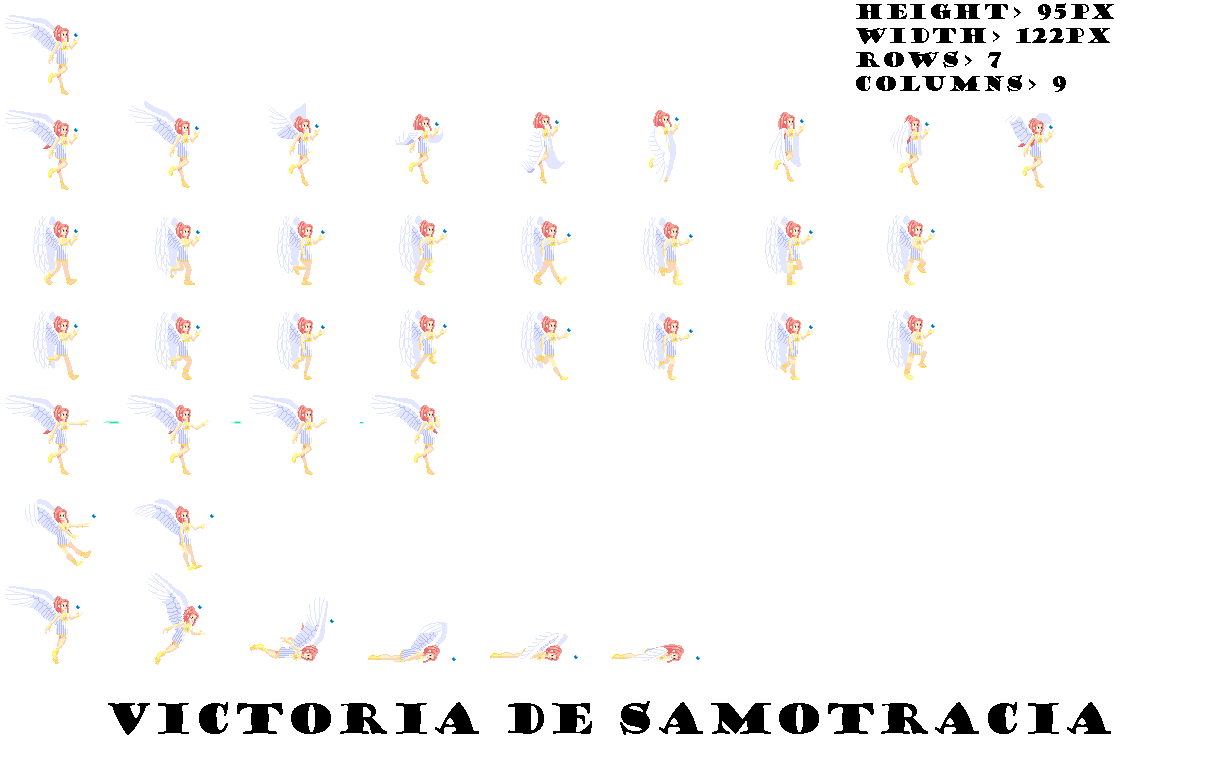
<style>
.page{position:relative;width:1220px;height:760px;background:#ffffff}
.page>*{position:absolute;margin:0}
.t1{font:20px "GoudyStout";color:#000000}
.t2{font:40px "GoudyStout";color:#000000}
.t3{font:26.7px "GoudyStout";color:#000000}
</style>
<div class="page">
<p class="t1" style="left:856px;top:3px;width:258px;height:89px">height&gt; 95px<br>width&gt; 122px<br>rows&gt; 7<br>columns&gt; 9</p>
<p class="t2" style="left:108px;top:701px;width:1003px;height:34px"><span class="t3"><br></span>victoria de samotracia</p>
</div>
